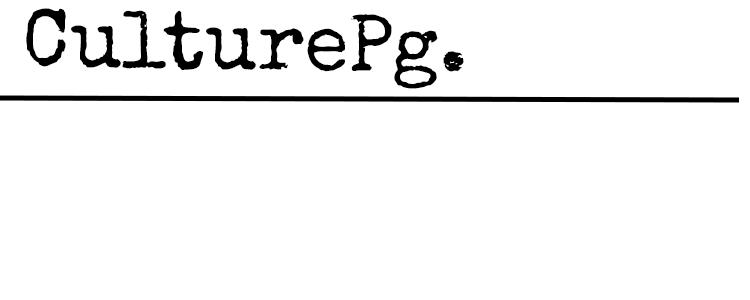
<style>
.page{position:relative;width:750px;height:300px;background:#ffffff}
.page>*{position:absolute;margin:0}
.t1{font:81.5px "SpecialElite-Regular";color:#000000}
</style>
<div class="page">
<p class="t1" style="left:26px;top:8px;width:438px;height:81px;rotate:1deg">CulturePg.</p>
</div>
